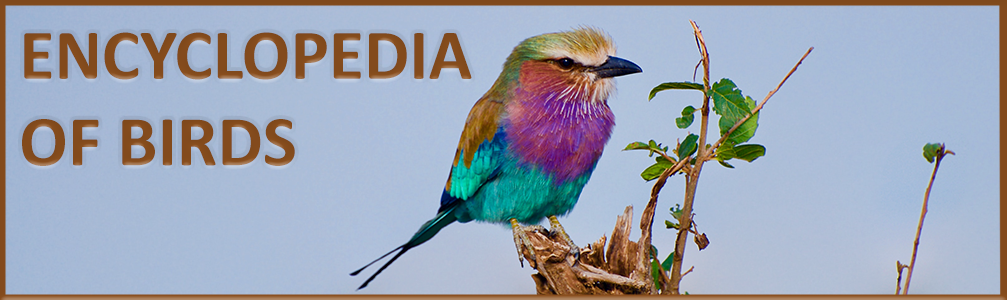
<style>
.page{position:relative;width:1007px;height:300px}
.page>*{position:absolute;margin:0}
.t1{font:72px "Calibri-Bold";color:#894e1d}
</style>
<div class="page">
<p class="t1" style="left:22px;top:32px;width:450px;height:134px">ENCYCLOPEDIA<br>OF BIRDS</p>
</div>
